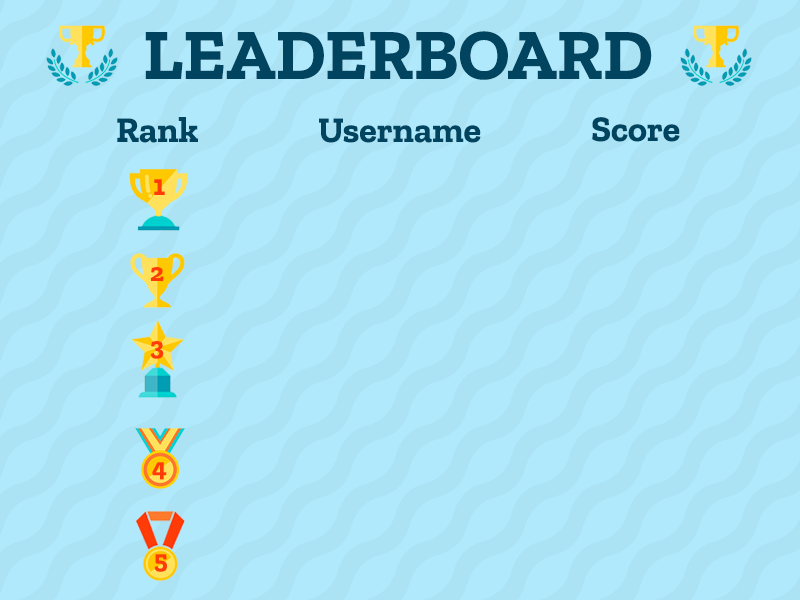
<style>
.page{position:relative;width:800px;height:600px;background:#b0e9fc}
.page>*{position:absolute;margin:0}
.t1{font:72px "ZillaSlab-Bold";color:#004460}
.t2{font:36px "ZillaSlab-Bold";color:#004460}
.t3{font:30px "ZillaSlab-Bold";color:#ff3b07}
.t4{font:26px "ZillaSlab-Bold";color:#ff3b07}
</style>
<div class="page">
<p class="t1" style="left:145px;top:31px;width:507px;height:49px">LEADERBOARD</p>
<p class="t2" style="left:117px;top:117px;width:81px;height:26px">Rank</p>
<p class="t2" style="left:319px;top:118px;width:162px;height:25px">Username</p>
<p class="t2" style="left:592px;top:117px;width:88px;height:25px">Score</p>
<p class="t3" style="left:154px;top:179px;width:11px;height:16px">1</p>
<p class="t4" style="left:150px;top:267px;width:14px;height:14px">2</p>
<p class="t4" style="left:150px;top:341px;width:14px;height:18px">3</p>
<p class="t4" style="left:152px;top:462px;width:15px;height:18px">4</p>
<p class="t4" style="left:154px;top:554px;width:13px;height:18px">5</p>
</div>
